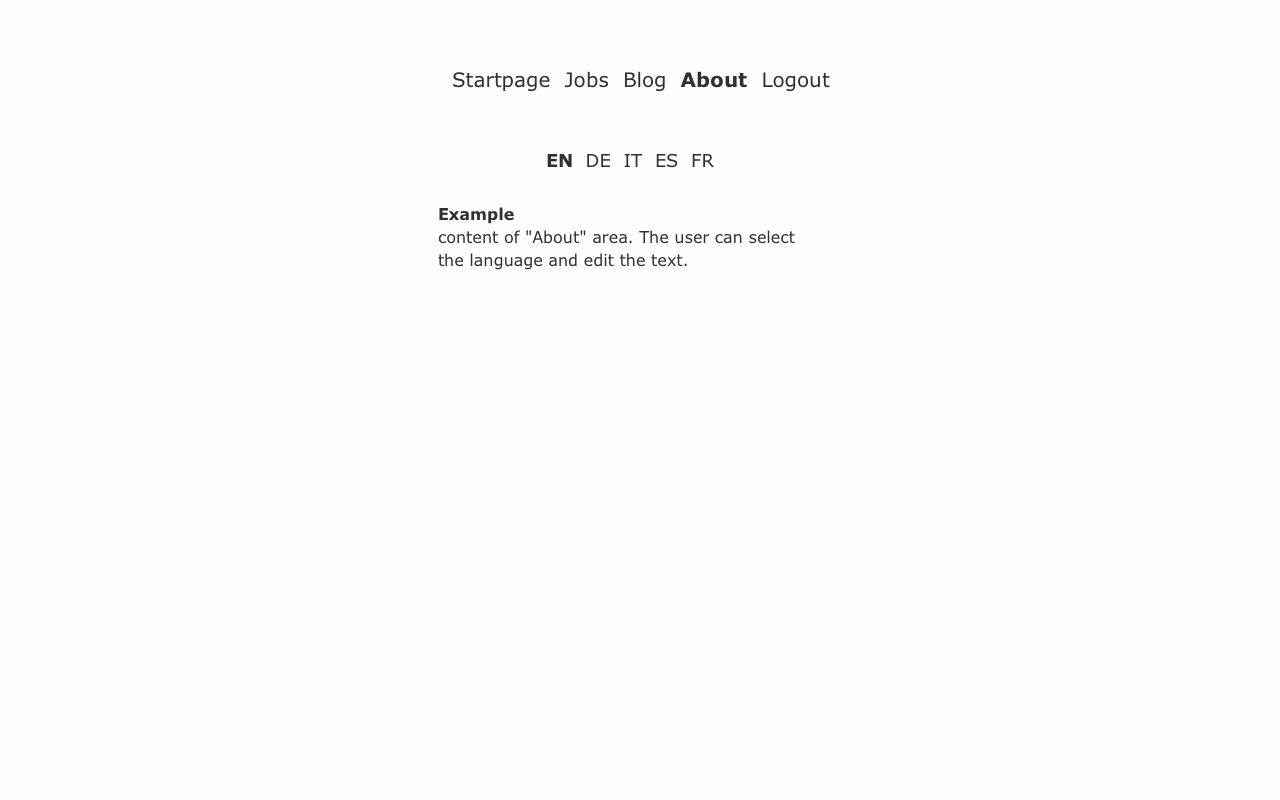
<style>
.page{position:relative;width:1280px;height:800px;background:#fcffff}
.page>*{position:absolute;margin:0}
.t1{font:20px "Verdana";color:#303030}
.t2{font:20px "Verdana-Bold";color:#303030}
.t3{font:18px "Verdana";color:#303030}
.t4{font:18px "Verdana-Bold";color:#303030}
.t5{font:16px/22.5px "Verdana";color:#303030}
.t6{font:16px/22.5px "Verdana-Bold";color:#303030}
</style>
<div class="page">
<p class="t1" style="left:453px;top:71px;width:377px;height:21px">Startpage  Jobs  Blog  <span class="t2">About</span>  Logout</p>
<p class="t3" style="left:547px;top:153px;width:168px;height:15px"><span class="t4">EN  </span>DE  IT  ES  FR</p>
<p class="t5" style="left:438px;top:207px;width:357px;height:63px"><span class="t6">Example</span> <br>content of ”About” area. The user can select<br>the language and edit the text.</p>
</div>
